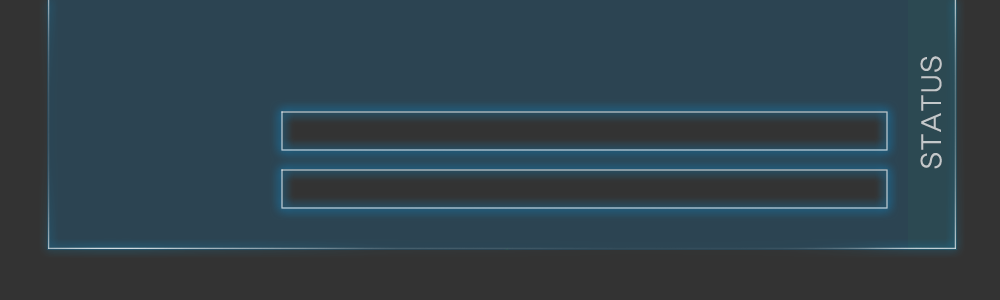
<style>
.page{position:relative;width:1000px;height:300px;background:#2c4452}
.page>*{position:absolute;margin:0}
.t1{font:27.8px "YDIYGO320";letter-spacing:0.1em;color:#c3c8ca}
</style>
<div class="page">
<p class="t1" style="left:920px;top:56px;width:22px;height:113px;rotate:-90deg">STATUS</p>
</div>
